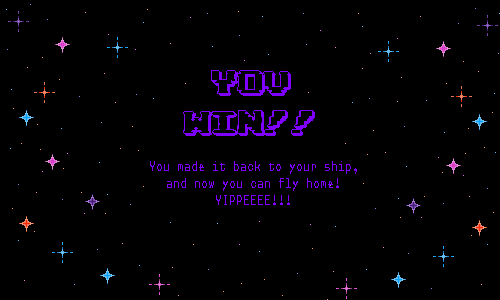
<style>
.page{position:relative;width:500px;height:300px;background:#000000}
.page>*{position:absolute;margin:0}
.t1{font:33.5px "CCPixelArcade-Cartridge";color:#7e00ff}
.t2{font:14px "Receipt-Narrow";color:#7e00ff}
</style>
<div class="page">
<p class="t1" style="left:183px;top:70px;width:132px;height:66px;text-align:center">YOU<br>WIN!!</p>
<p class="t2" style="left:150px;top:161px;width:207px;height:44px;text-align:center">You made it back to your ship, and now you can fly home!<br>YIPPEEEE!!!</p>
</div>
